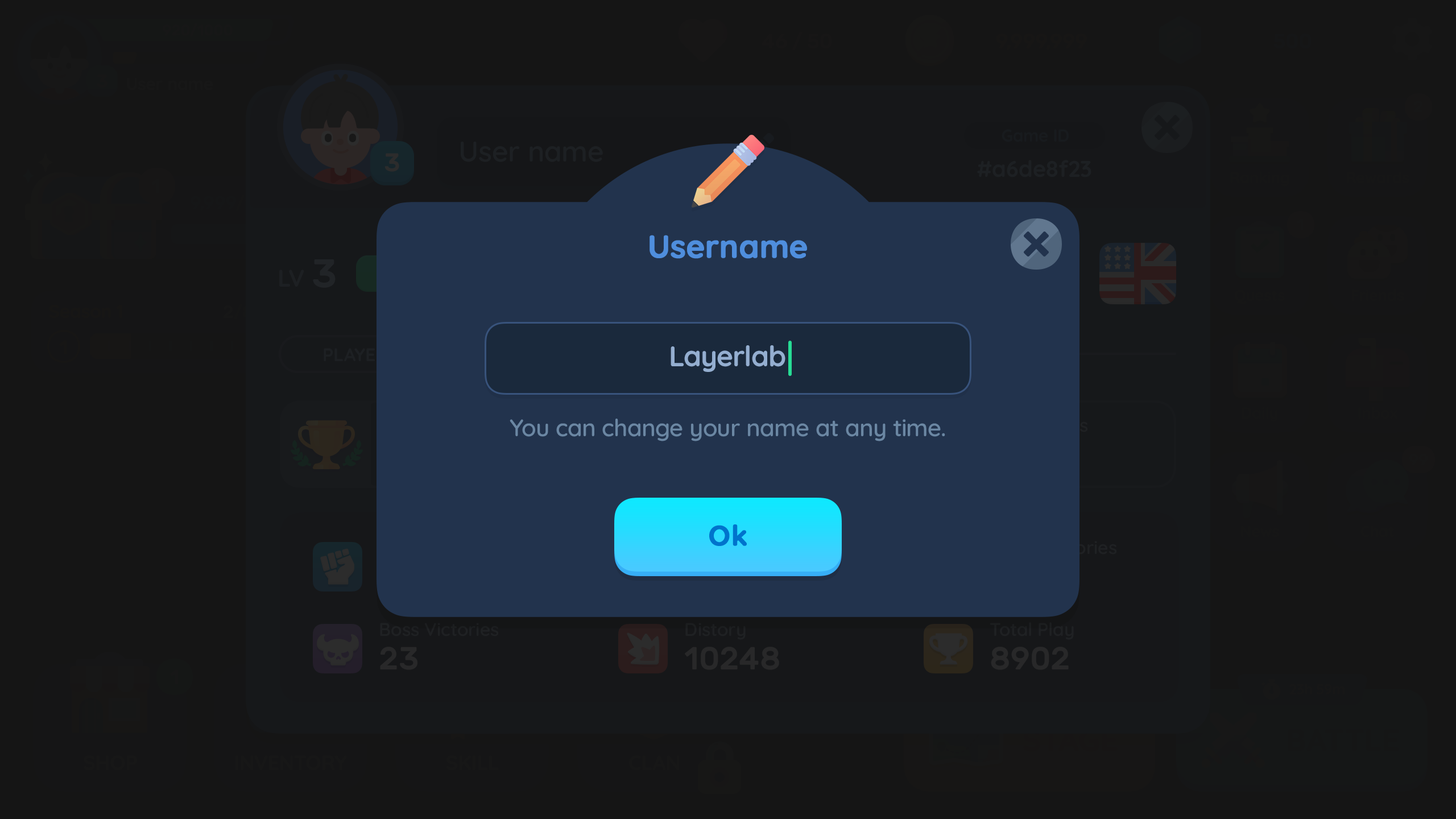
<style>
.page{position:relative;width:1456px;height:819px;background:#151515}
.page>*{position:absolute;margin:0}
.t1{font:31.8px "Quicksand-Bold";color:#4f8edd;font-weight:bold}
.t2{font:28.4px "Quicksand-Bold";letter-spacing:-0.01em;color:#94aed0}
.t3{font:23.9px "Quicksand-SemiBold";letter-spacing:-0.01em;color:#6b87a3}
.t4{font:28.4px "Quicksand-Bold";color:#0073cc;font-weight:bold}
</style>
<div class="page">
<p class="t1" style="left:650px;top:235px;width:157px;height:24px">Username</p>
<p class="t2" style="left:671px;top:345px;width:114px;height:27px">Layerlab</p>
<p class="t3" style="left:510px;top:419px;width:435px;height:22px">You can change your name at any time.</p>
<p class="t4" style="left:709px;top:524px;width:38px;height:22px">Ok</p>
</div>
